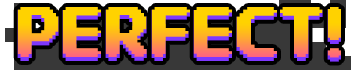
<style>
.page{position:relative;width:357px;height:70px;background:#000000}
.page>*{position:absolute;margin:0}
.t1{font:60px "DNFBitBitv2";text-transform:uppercase}
</style>
<div class="page">
<p class="t1" style="left:17px;top:7px;width:324px;height:55px">Perfect!</p>
</div>
